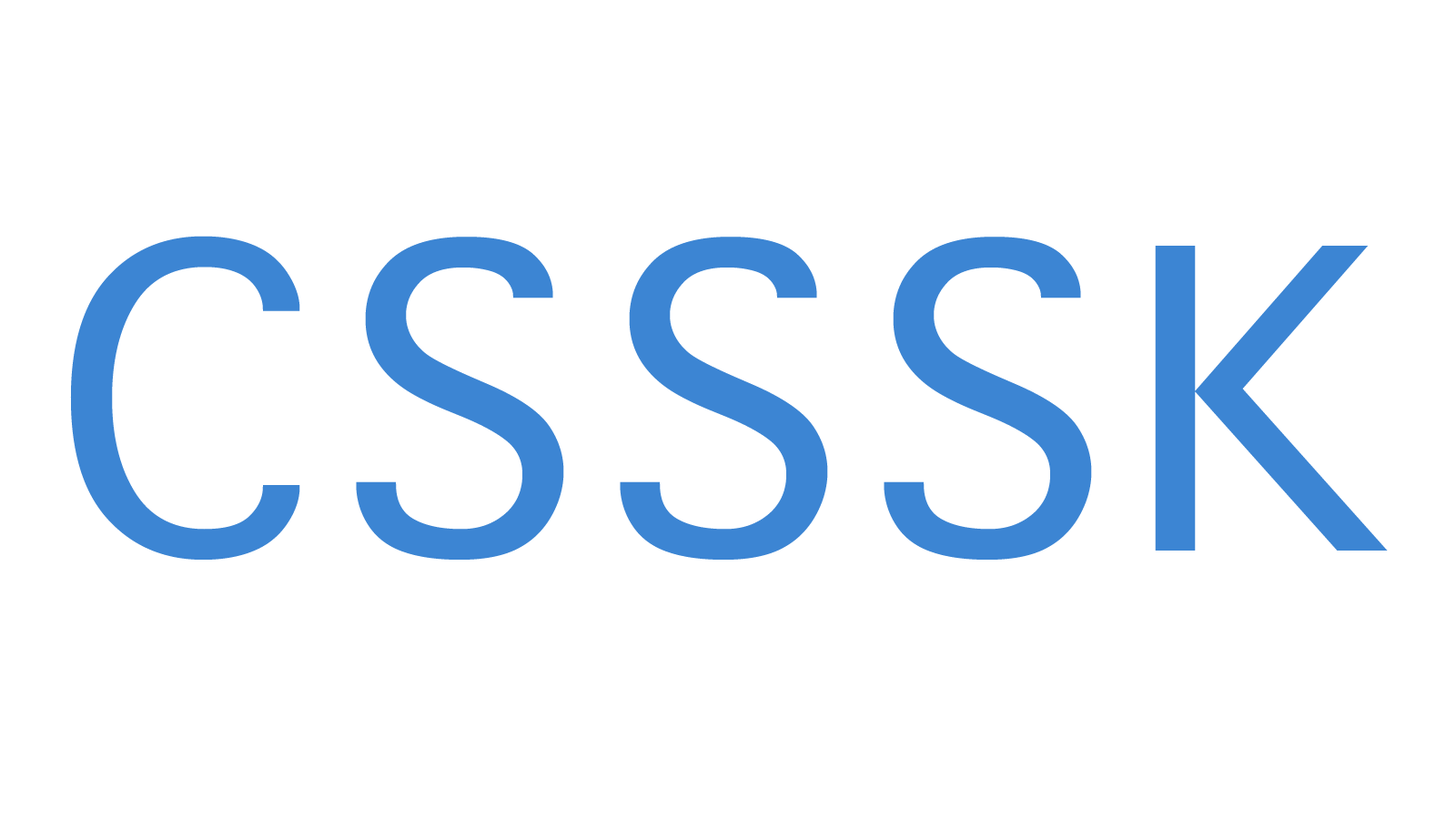
<style>
.page{position:relative;width:1456px;height:819px;background:#ffffff}
.page>*{position:absolute;margin:0}
.t1{font:402.3px "Geneva";letter-spacing:0.05em;color:#3c85d3}
</style>
<div class="page">
<p class="t1" style="left:70px;top:236px;width:1318px;height:324px">CSSSK</p>
</div>
